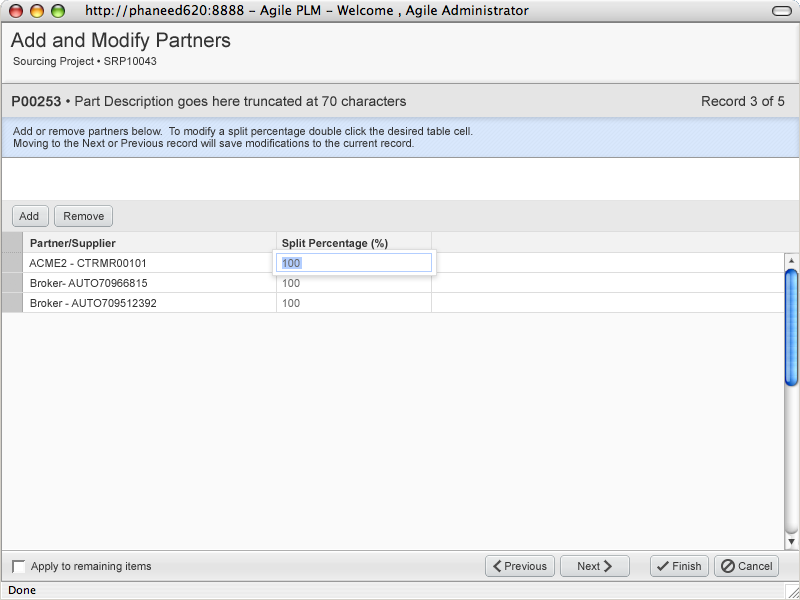
<style>
.page{position:relative;width:800px;height:600px;background:#fafafa}
.page>*{position:absolute;margin:0}
.t1{font:20px "ArialMT";color:#333333}
.t2{font:11px "ArialMT";color:#333333}
.t3{font:14px "ArialMT";color:#333333}
.t4{font:14px "ArialMT";color:#333333;font-weight:bold}
.t5{font:11px/12px "ArialMT";color:#333333}
.t6{font:11px "Arial-BoldMT";color:#333333}
.t7{font:11px/16px "Arial-BoldMT";color:#333333}
.t8{font:11px/20px "ArialMT";color:#666666}
.t9{font:11px/20px "ArialMT";color:#333333}
</style>
<div class="page">
<p class="t1" style="left:10px;top:32px;width:221px;height:20px">Add and Modify Partners</p>
<p class="t2" style="left:13px;top:57px;width:144px;height:11px">Sourcing Project • SRP10043</p>
<p class="t3" style="left:12px;top:96px;width:394px;height:13px"><span class="t4">P00253 </span>• Part Description goes here truncated at 70 characters</p>
<p class="t3" style="left:702px;top:96px;width:83px;height:10px">Record 3 of 5</p>
<p class="t5" style="left:13px;top:127px;width:460px;height:23px">Add or remove partners below.  To modify a split percentage double click the desired table cell.<br>Moving to the Next or Previous record will save modifications to the current record.</p>
<p class="t2" style="left:19px;top:212px;width:20px;height:8px">Add</p>
<p class="t2" style="left:64px;top:212px;width:40px;height:8px">Remove</p>
<p class="t6" style="left:30px;top:239px;width:86px;height:11px">Partner/Supplier</p>
<p class="t7" style="left:282px;top:239px;width:106px;height:68px">Split Percentage (%)<br><span class="t8">100<br>100<br>100</span></p>
<p class="t9" style="left:29px;top:259px;width:127px;height:48px"><span class="t7"><br>   </span>ACME2 - CTRMR00101<br>   Broker- AUTO70966815<br>   Broker - AUTO709512392</p>
<p class="t2" style="left:31px;top:562px;width:120px;height:11px">Apply to remaining items</p>
<p class="t2" style="left:505px;top:562px;width:42px;height:8px">Previous</p>
<p class="t2" style="left:578px;top:562px;width:22px;height:8px">Next</p>
<p class="t2" style="left:673px;top:562px;width:28px;height:8px">Finish</p>
<p class="t2" style="left:738px;top:562px;width:34px;height:8px">Cancel</p>
</div>
